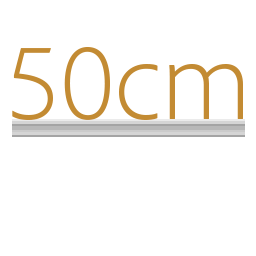
<style>
.page{position:relative;width:256px;height:256px;background:#ffffff}
.page>*{position:absolute;margin:0}
.t1{font:110.8px "AdobeClean-Light";color:#c38b33}
</style>
<div class="page">
<p class="t1" style="left:12px;top:47px;width:231px;height:73px">50cm</p>
</div>
